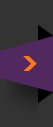
<style>
.page{position:relative;width:53px;height:127px;background:#333333}
.page>*{position:absolute;margin:0}
.t1{font:40px "Cabin-Bold";color:#ff771e}
</style>
<div class="page">
<p class="t1" style="left:22px;top:55px;width:15px;height:17px;rotate:180deg">&lt;</p>
</div>
